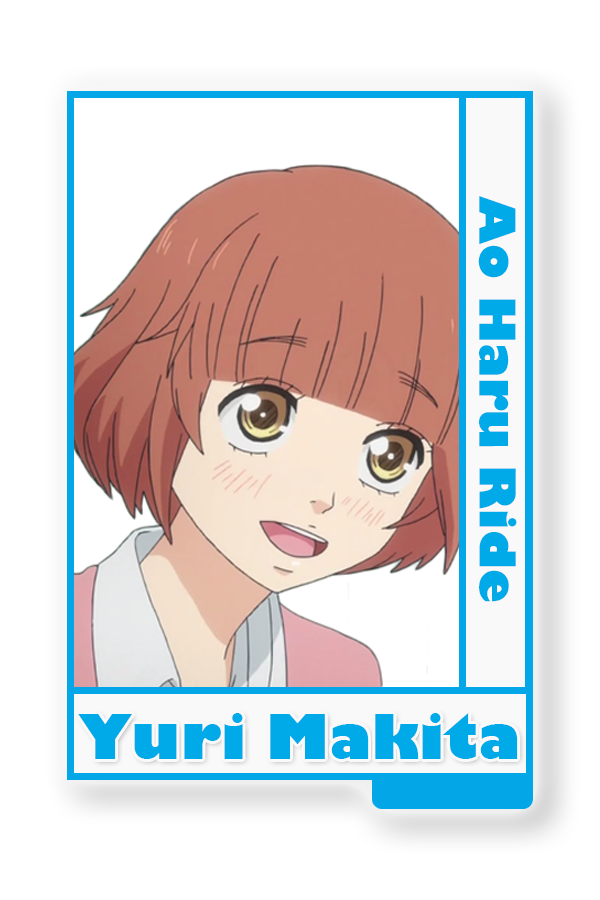
<style>
.page{position:relative;width:600px;height:900px;background:#ffffff}
.page>*{position:absolute;margin:0}
.t1{font:48.8px "GillSans-UltraBold";color:#00a9e7}
.t2{font:60.3px "GillSans-UltraBold";color:#00a9e7}
</style>
<div class="page">
<p class="t1" style="left:478px;top:196px;width:39px;height:406px;rotate:90deg">Ao Haru Ride</p>
<p class="t2" style="left:78px;top:713px;width:440px;height:46px">Yuri Makita</p>
</div>
